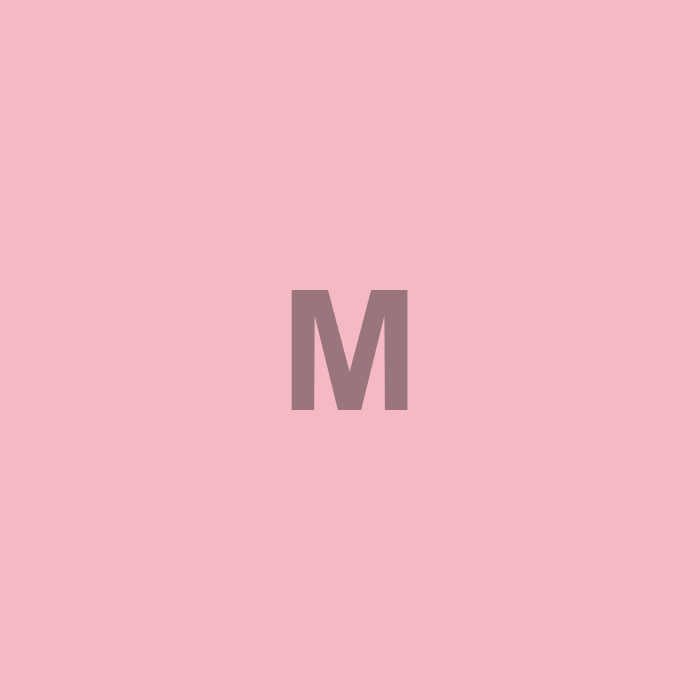
<style>
.page{position:relative;width:700px;height:700px;background:#f4b9c2}
.page>*{position:absolute;margin:0}
.t1{font:166.7px "Arial-BoldMT";color:#9a757b}
</style>
<div class="page">
<p class="t1" style="left:291px;top:290px;width:117px;height:120px">M</p>
</div>
